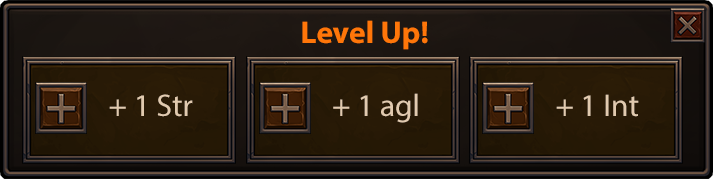
<style>
.page{position:relative;width:713px;height:179px}
.page>*{position:absolute;margin:0}
.t1{font:31.4px "MyriadPro-Bold";color:#ff7609}
.t2{font:31.4px "MyriadPro-Regular";color:#e1caaf}
</style>
<div class="page">
<p class="t1" style="left:302px;top:20px;width:126px;height:30px">Level Up!</p>
<p class="t2" style="left:109px;top:94px;width:84px;height:23px">+ 1 Str</p>
<p class="t2" style="left:333px;top:93px;width:85px;height:30px">+ 1 agl</p>
<p class="t2" style="left:556px;top:94px;width:83px;height:23px">+ 1 Int</p>
</div>
